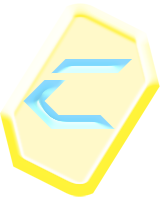
<style>
.page{position:relative;width:160px;height:200px;background:#ffffff}
.page>*{position:absolute;margin:0}
.t1{font:100px "PerfectDarkBRK)"}
</style>
<div class="page">
<p class="t1" style="left:23px;top:59px;width:109px;height:70px">C</p>
</div>
